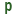
<style>
.page{position:relative;width:16px;height:16px;background:#ffffff}
.page>*{position:absolute;margin:0}
.t1{font:17.5px "FranklinGothic-MediumCond";letter-spacing:0.2em;color:#2b6325}
</style>
<div class="page">
<p class="t1" style="left:5px;top:2px;width:7px;height:12px">p</p>
</div>
